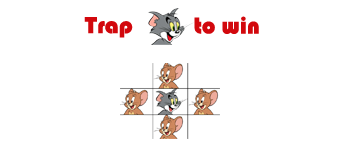
<style>
.page{position:relative;width:348px;height:150px;background:#ffffff}
.page>*{position:absolute;margin:0}
.t1{font:24px "Bauhaus93";color:#d2080d}
</style>
<div class="page">
<p class="t1" style="left:84px;top:17px;width:49px;height:21px">Trap</p>
<p class="t1" style="left:194px;top:16px;width:65px;height:18px">to win</p>
</div>
